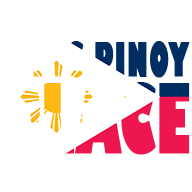
<style>
.page{position:relative;width:192px;height:192px;background:#ffffff}
.page>*{position:absolute;margin:0}
.t1{font:46.4px "GillSans-UltraBold";text-transform:uppercase;font-weight:bold;scale:0.5 1}
.t2{font:92.9px "GillSans-UltraBold";text-transform:uppercase;font-weight:bold;scale:0.5 1}
</style>
<div class="page">
<p class="t1" style="left:4px;top:41px;width:186px;height:114px;text-align:center">1 Pic Pinoy<br><span class="t2">Place</span></p>
</div>
